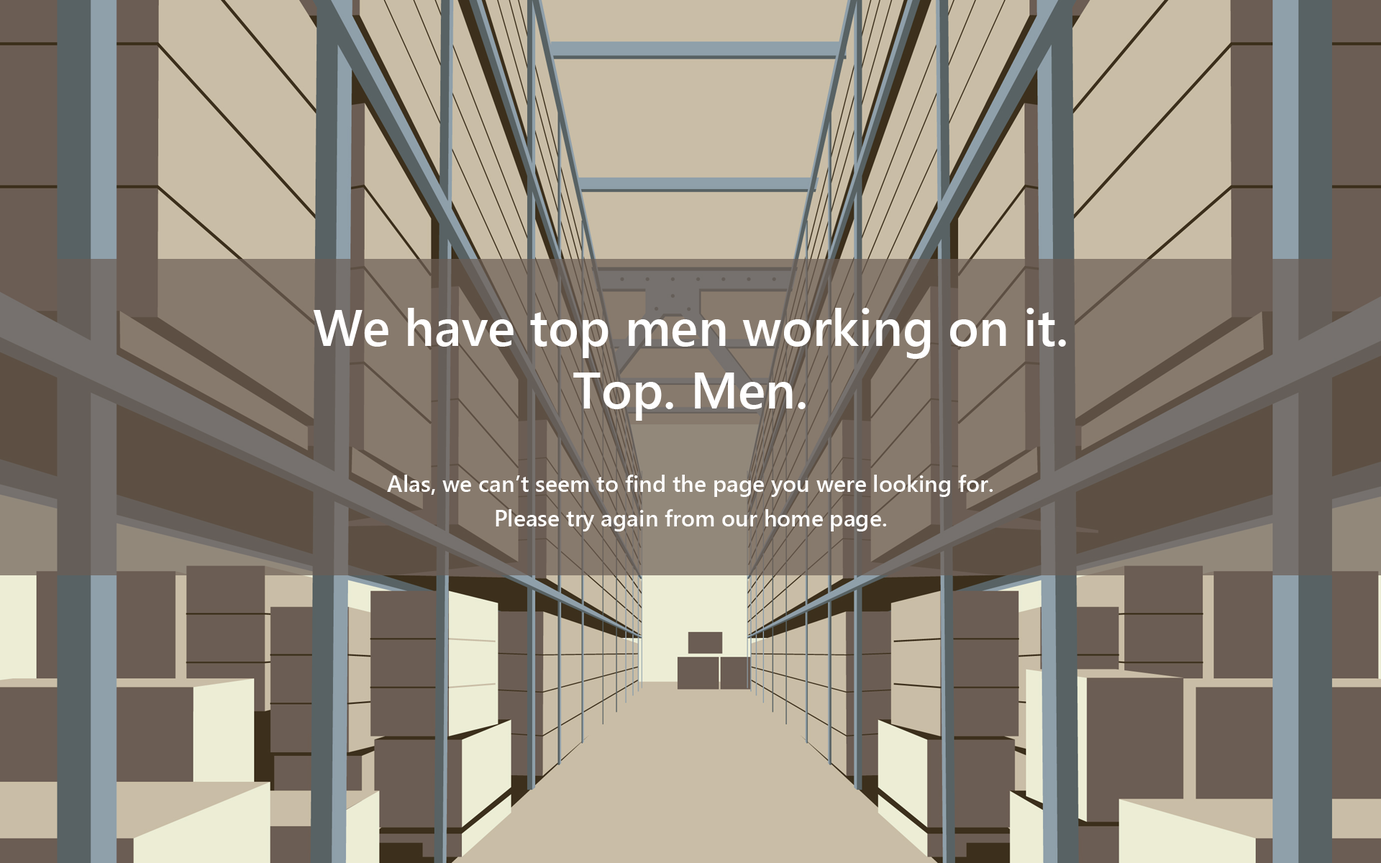
<style>
.page{position:relative;width:1381px;height:863px;background:#c9bda7}
.page>*{position:absolute;margin:0}
.t1{font:51.8px "SegoeUI-SemiBold";color:#ffffff}
.t2{font:23px/34.5px "SegoeUI-SemiBold";color:#ffffff}
</style>
<div class="page">
<p class="t1" style="left:313px;top:308px;width:753px;height:113px;text-align:center">We have top men working on it.<br>Top. Men.</p>
<p class="t2" style="left:387px;top:475px;width:607px;height:57px;text-align:center">Alas, we can’t seem to find the page you were looking for.<br>Please try again from our home page.</p>
</div>
